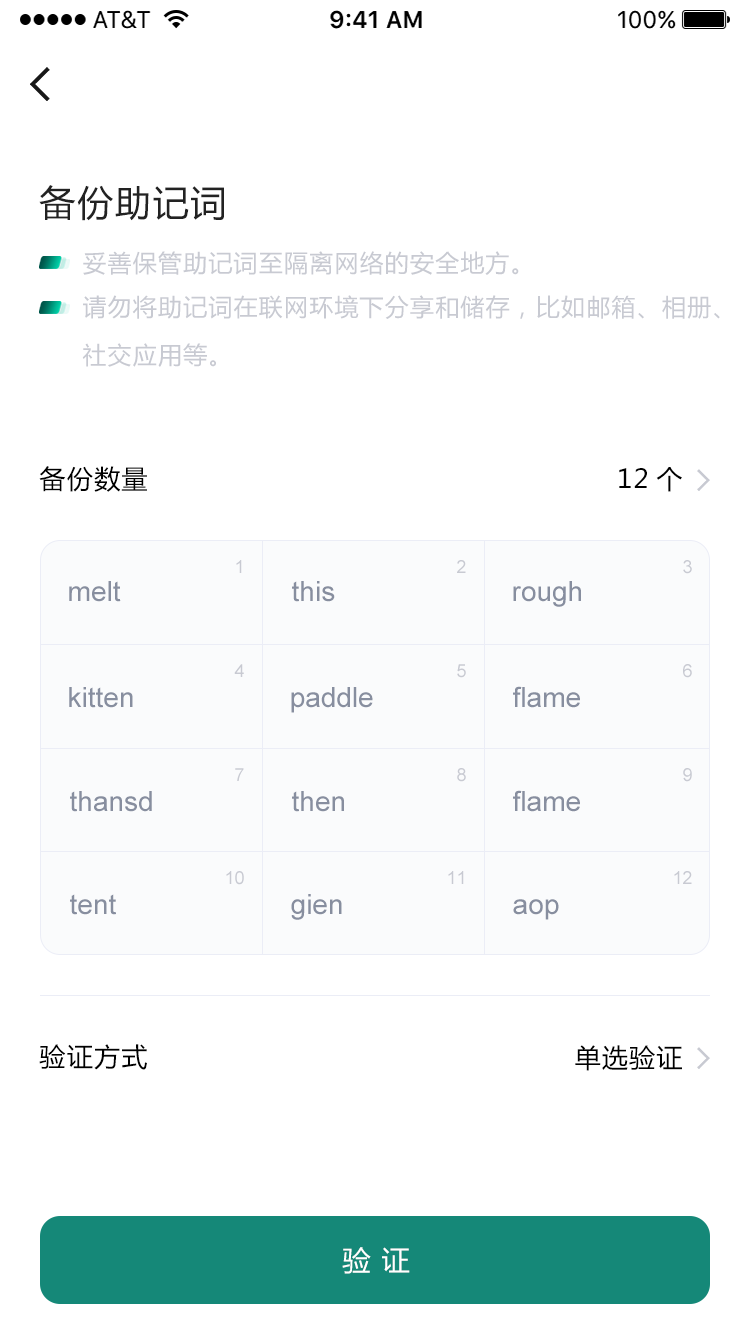
<style>
.page{position:relative;width:750px;height:1334px;background:#ffffff}
.page>*{position:absolute;margin:0}
.t1{font:36px "MicrosoftYaHei";letter-spacing:0.05em;color:#222222}
.t2{font:24px "MicrosoftYaHei";letter-spacing:0.05em;color:#c8cad2}
.t3{font:24px/48px "MicrosoftYaHei";letter-spacing:0.05em;color:#c8cad2}
.t4{font:26px "MicrosoftYaHei";letter-spacing:0.05em;color:#000000}
.t5{font:18px "ArialMT";color:#c8cad2}
.t6{font:28px "ArialMT";color:#878e9f}
.t7{font:28px "MicrosoftYaHei";letter-spacing:0.05em;color:#ffffff}
</style>
<div class="page">
<p class="t1" style="left:39px;top:185px;width:185px;height:36px">备份助记词</p>
<p class="t2" style="left:83px;top:251px;width:436px;height:24px">妥善保管助记词至隔离网络的安全地方。</p>
<p class="t3" style="left:82px;top:295px;width:638px;height:72px">请勿将助记词在联网环境下分享和储存，比如邮箱、相册、<br>社交应用等。</p>
<p class="t4" style="left:39px;top:466px;width:108px;height:26px">备份数量</p>
<p class="t4" style="left:619px;top:467px;width:63px;height:25px">12个</p>
<p class="t5" style="left:236px;top:560px;width:6px;height:13px">1</p>
<p class="t5" style="left:457px;top:560px;width:9px;height:13px">2</p>
<p class="t5" style="left:683px;top:560px;width:9px;height:14px">3</p>
<p class="t6" style="left:69px;top:581px;width:52px;height:21px">melt</p>
<p class="t6" style="left:292px;top:581px;width:43px;height:21px">this</p>
<p class="t6" style="left:513px;top:581px;width:68px;height:26px">rough</p>
<p class="t5" style="left:234px;top:664px;width:10px;height:13px">4</p>
<p class="t5" style="left:457px;top:664px;width:9px;height:14px">5</p>
<p class="t5" style="left:683px;top:664px;width:9px;height:14px">6</p>
<p class="t6" style="left:69px;top:687px;width:64px;height:21px">kitten</p>
<p class="t6" style="left:291px;top:687px;width:82px;height:26px">paddle</p>
<p class="t6" style="left:513px;top:686px;width:67px;height:22px">flame</p>
<p class="t5" style="left:235px;top:768px;width:9px;height:13px">7</p>
<p class="t5" style="left:457px;top:768px;width:9px;height:14px">8</p>
<p class="t5" style="left:683px;top:768px;width:9px;height:14px">9</p>
<p class="t6" style="left:70px;top:791px;width:82px;height:21px">thansd</p>
<p class="t6" style="left:292px;top:791px;width:52px;height:21px">then</p>
<p class="t6" style="left:513px;top:790px;width:67px;height:22px">flame</p>
<p class="t5" style="left:226px;top:871px;width:18px;height:14px">10</p>
<p class="t5" style="left:448px;top:871px;width:16px;height:13px">11</p>
<p class="t5" style="left:674px;top:871px;width:18px;height:13px">12</p>
<p class="t6" style="left:70px;top:894px;width:46px;height:21px">tent</p>
<p class="t6" style="left:291px;top:894px;width:51px;height:26px">gien</p>
<p class="t6" style="left:513px;top:899px;width:46px;height:21px">aop</p>
<p class="t4" style="left:39px;top:1044px;width:108px;height:26px">验证方式</p>
<p class="t4" style="left:575px;top:1045px;width:107px;height:26px">单选验证</p>
<p class="t7" style="left:342px;top:1247px;width:68px;height:27px">验 证</p>
</div>
